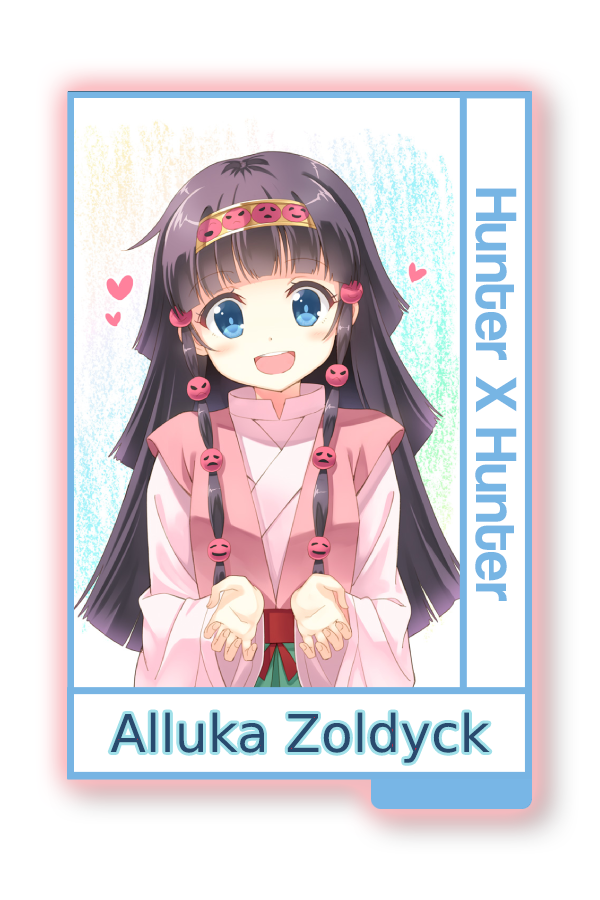
<style>
.page{position:relative;width:600px;height:900px;background:#ffffff}
.page>*{position:absolute;margin:0}
.t1{font:60.8px "CoolveticaRg-Regular";color:#77b5e4}
.t2{font:52px "CoolveticaRg-Regular";color:#294a6e}
</style>
<div class="page">
<p class="t1" style="left:475px;top:188px;width:42px;height:413px;rotate:90deg">Hunter X Hunter</p>
<p class="t2" style="left:110px;top:712px;width:380px;height:51px">Alluka Zoldyck</p>
</div>
